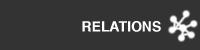
<style>
.page{position:relative;width:200px;height:50px;background:#333333}
.page>*{position:absolute;margin:0}
.t1{font:14px "Helvetica-Bold";color:#ffffff;text-transform:uppercase}
</style>
<div class="page">
<p class="t1" style="left:82px;top:21px;width:79px;height:11px">RELATIONS</p>
</div>
